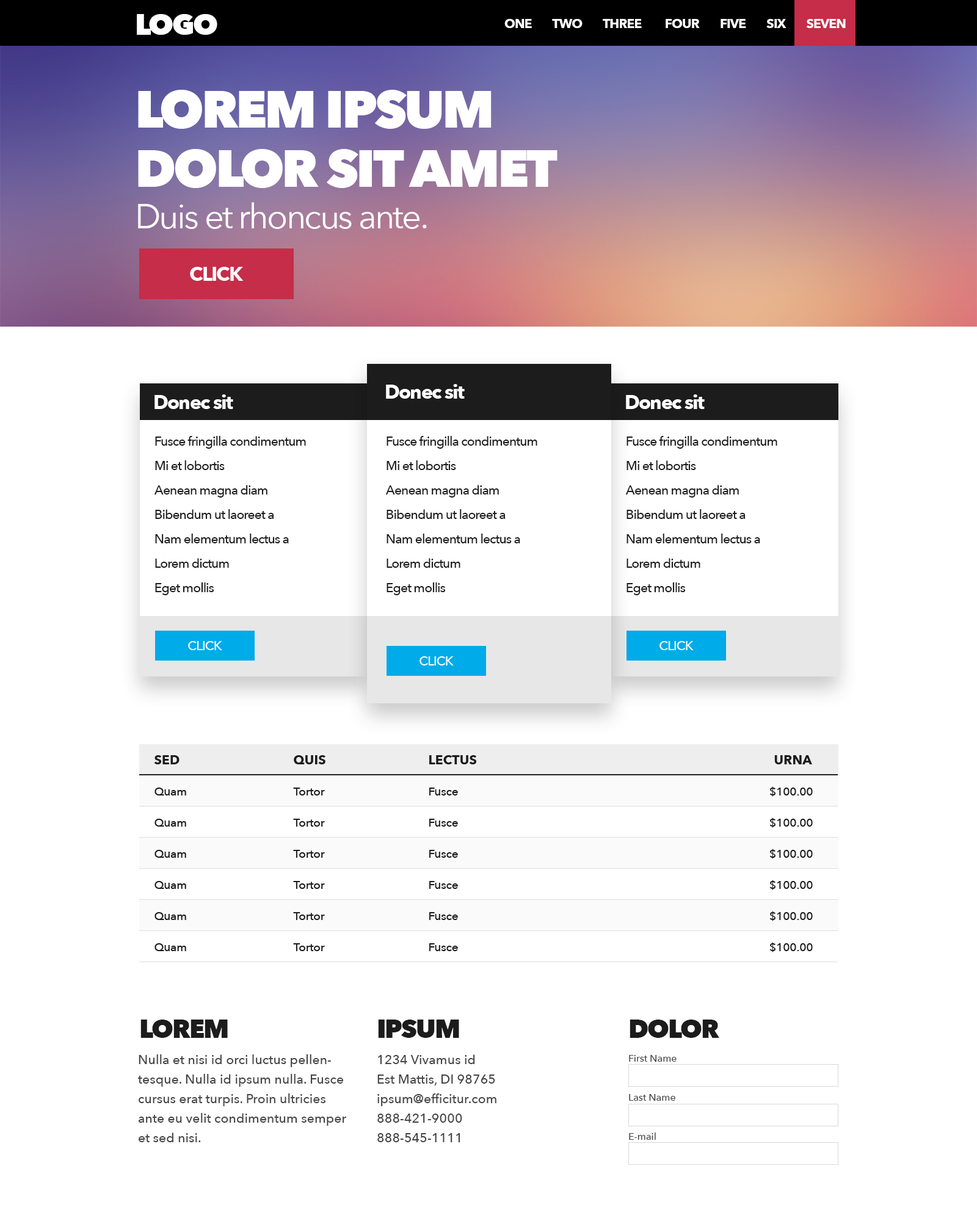
<style>
.page{position:relative;width:977px;height:1221px;background:#ffffff}
.page>*{position:absolute;margin:0}
.t1{font:29.3px "AvenirNext-Heavy";letter-spacing:-0.05em;color:#ffffff;text-transform:uppercase}
.t2{font:13px "AvenirNext-Bold";letter-spacing:-0.05em;color:#ffffff;text-transform:uppercase}
.t3{font:52.1px/59.1px "AvenirNext-Heavy";letter-spacing:-0.05em;color:#ffffff;text-transform:uppercase}
.t4{font:34.2px "AvenirNext-Regular";letter-spacing:-0.05em;color:#ffffff}
.t5{font:19.5px "AvenirNext-Bold";letter-spacing:-0.05em;color:#ffffff}
.t6{font:13px/24.4px "AvenirNext-Medium";letter-spacing:-0.05em;color:#1d1c1c}
.t7{font:25.8px "AvenirNext-Heavy";letter-spacing:-0.05em;color:#1d1c1c}
.t8{font:13px/19.5px "AvenirNext-Medium";color:#464646}
.t9{font:9.8px/19.5px "AvenirNext-Medium";color:#464646}
</style>
<div class="page">
<p class="t1" style="left:137px;top:14px;width:80px;height:21px">LOGO</p>
<p class="t2" style="left:504px;top:19px;width:341px;height:9px">ONE        TWO        THREE         FOUR        FIVE        SIX        SEVEN</p>
<p class="t3" style="left:138px;top:90px;width:419px;height:98px">LOREM IPSUM<br>DOLOR SIT AMET</p>
<p class="t4" style="left:138px;top:202px;width:289px;height:27px">Duis et rhoncus ante.</p>
<p class="t5" style="left:386px;top:384px;width:79px;height:15px">Donec sit</p>
<p class="t5" style="left:154px;top:394px;width:79px;height:15px">Donec sit</p>
<p class="t5" style="left:626px;top:394px;width:78px;height:15px">Donec sit</p>
<p class="t6" style="left:154px;top:436px;width:152px;height:159px">Fusce fringilla condimentum<br>Mi et lobortis<br>Aenean magna diam<br>Bibendum ut laoreet a<br>Nam elementum lectus a<br>Lorem dictum<br>Eget mollis</p>
<p class="t6" style="left:385px;top:436px;width:152px;height:159px">Fusce fringilla condimentum<br>Mi et lobortis<br>Aenean magna diam<br>Bibendum ut laoreet a<br>Nam elementum lectus a<br>Lorem dictum<br>Eget mollis</p>
<p class="t6" style="left:625px;top:436px;width:152px;height:159px">Fusce fringilla condimentum<br>Mi et lobortis<br>Aenean magna diam<br>Bibendum ut laoreet a<br>Nam elementum lectus a<br>Lorem dictum<br>Eget mollis</p>
<p class="t7" style="left:140px;top:1019px;width:88px;height:19px">LOREM</p>
<p class="t7" style="left:378px;top:1019px;width:81px;height:19px">IPSUM</p>
<p class="t7" style="left:629px;top:1019px;width:90px;height:19px">DOLOR</p>
<p class="t8" style="left:138px;top:1054px;width:208px;height:88px">Nulla et nisi id orci luctus pellentesque. Nulla id ipsum nulla. Fusce cursus erat turpis. Proin ultricies ante eu velit condimentum semper et sed nisi.</p>
<p class="t8" style="left:377px;top:1054px;width:119px;height:88px">1234 Vivamus id<br>Est Mattis, DI 98765<br>ipsum@efficitur.com<br>888-421-9000<br>888-545-1111</p>
<p class="t9" style="left:629px;top:1055px;width:47px;height:85px">First Name<br><br>Last Name<br><br>E-mail</p>
</div>
